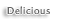
<style>
.page{position:relative;width:57px;height:22px;background:#ffffff}
.page>*{position:absolute;margin:0}
.t1{font:10px "Amira-Roman";letter-spacing:0.05em;color:#666666}
</style>
<div class="page">
<p class="t1" style="left:7px;top:6px;width:43px;height:8px">Delicious</p>
</div>
